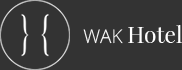
<style>
.page{position:relative;width:182px;height:70px;background:#333333}
.page>*{position:absolute;margin:0}
.t1{font:22.7px "PlayfairDisplay-Regular";color:#ffffff}
.t2{font:18.9px "OpenSans-Light";color:#ffffff}
</style>
<div class="page">
<p class="t1" style="left:83px;top:25px;width:99px;height:19px"><span class="t2">WAK </span>Hotel</p>
</div>
